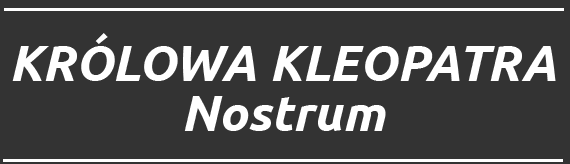
<style>
.page{position:relative;width:570px;height:164px;background:#333333}
.page>*{position:absolute;margin:0}
.t1{font:50px/50px "Ubuntu-BoldItalic";color:#ffffff}
</style>
<div class="page">
<p class="t1" style="left:12px;top:33px;width:544px;height:98px;text-align:center">KRÓLOWA KLEOPATRA Nostrum</p>
</div>
